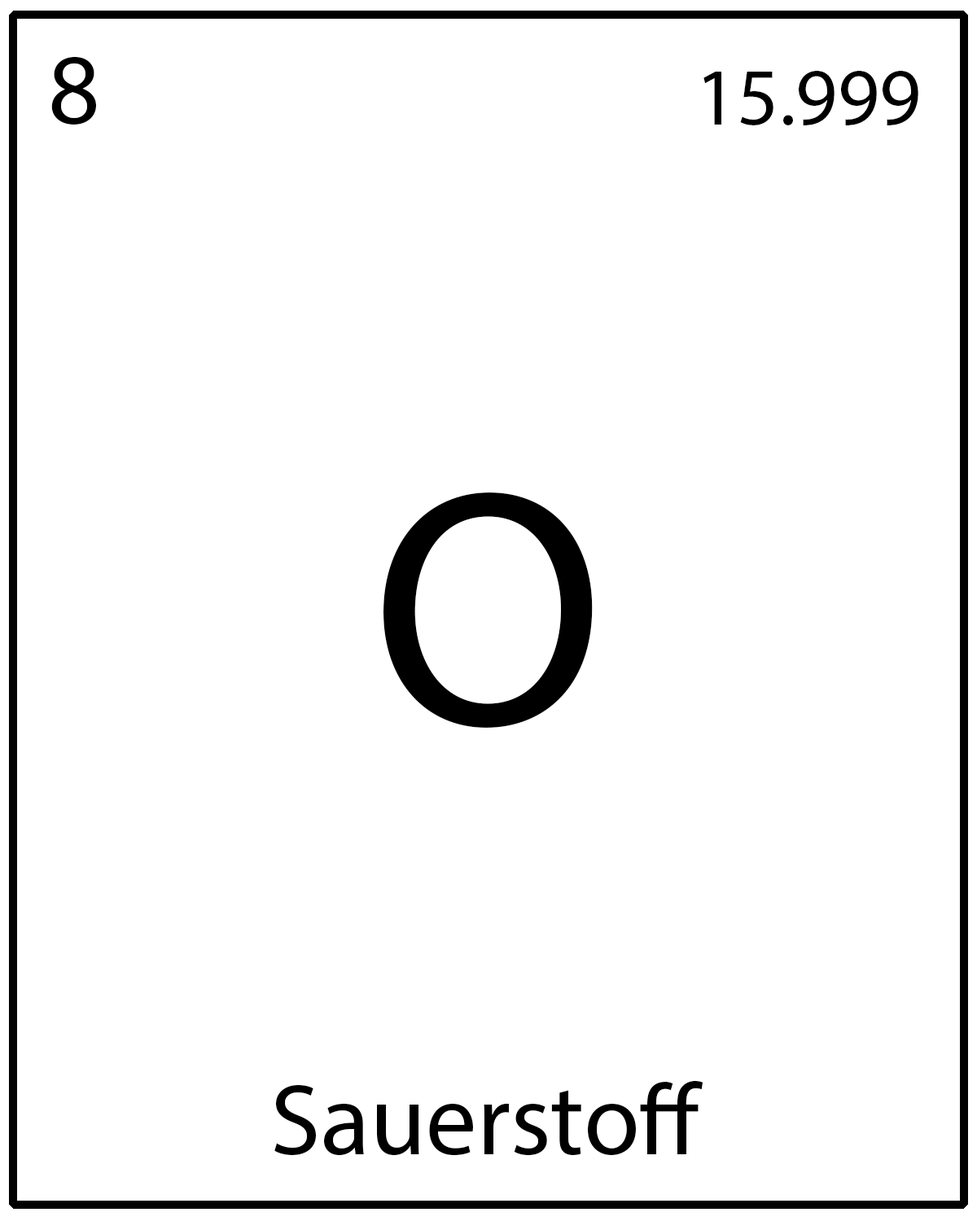
<style>
.page{position:relative;width:977px;height:1221px;background:#ffffff}
.page>*{position:absolute;margin:0}
.t1{font:101.7px "MyriadPro-Regular";color:#000000}
.t2{font:81.4px "MyriadPro-Regular";color:#000000}
.t3{font:339.1px "MyriadPro-Regular";color:#000000}
</style>
<div class="page">
<p class="t1" style="left:51px;top:56px;width:45px;height:69px">8</p>
<p class="t2" style="left:703px;top:71px;width:215px;height:54px">15.999</p>
<p class="t3" style="left:383px;top:492px;width:210px;height:236px">O</p>
<p class="t1" style="left:274px;top:1080px;width:428px;height:76px">Sauerstoff</p>
</div>
